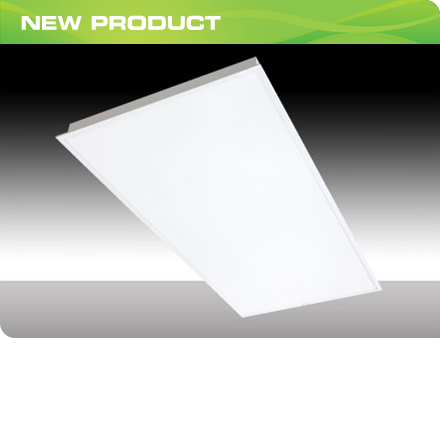
<style>
.page{position:relative;width:440px;height:432px;background:#ffffff}
.page>*{position:absolute;margin:0}
.t1{font:19.1px "Eurostile-BoldExtendedTwo";letter-spacing:-0.01em;color:#ffffff;scale:0.95 1}
</style>
<div class="page">
<p class="t1" style="left:21px;top:15px;width:200px;height:15px">NEW PRODUCT</p>
</div>
